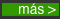
<style>
.page{position:relative;width:60px;height:19px;background:#339900}
.page>*{position:absolute;margin:0}
.t1{font:14px "Helvetica";color:#ffffff}
</style>
<div class="page">
<p class="t1" style="left:19px;top:3px;width:37px;height:11px">más &gt;</p>
</div>
